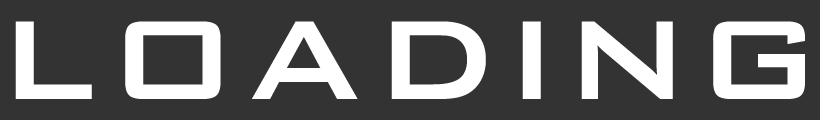
<style>
.page{position:relative;width:820px;height:120px;background:#333333}
.page>*{position:absolute;margin:0}
.t1{font:150px "BankGothicBT-Medium";letter-spacing:0.05em;color:#ffffff}
</style>
<div class="page">
<p class="t1" style="left:15px;top:21px;width:790px;height:78px">LOADING</p>
</div>
